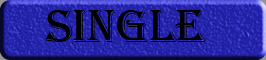
<style>
.page{position:relative;width:266px;height:60px}
.page>*{position:absolute;margin:0}
.t1{font:48px "Algerian";color:#000000}
</style>
<div class="page">
<p class="t1" style="left:45px;top:10px;width:161px;height:32px">SINGLE</p>
</div>
